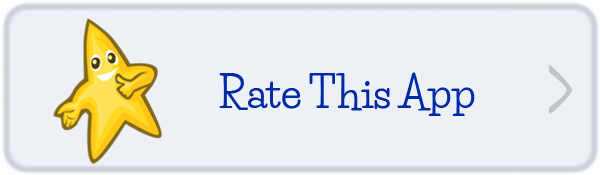
<style>
.page{position:relative;width:600px;height:175px;background:#edf0f5}
.page>*{position:absolute;margin:0}
.t1{font:41.6px "LifeSavers-Bold";color:#0229a6}
</style>
<div class="page">
<p class="t1" style="left:219px;top:72px;width:256px;height:44px">Rate This App</p>
</div>
